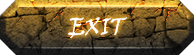
<style>
.page{position:relative;width:194px;height:55px}
.page>*{position:absolute;margin:0}
.t1{font:24px "VinerHandITC";color:#fefefe}
</style>
<div class="page">
<p class="t1" style="left:68px;top:17px;width:59px;height:21px">EXIT</p>
</div>
